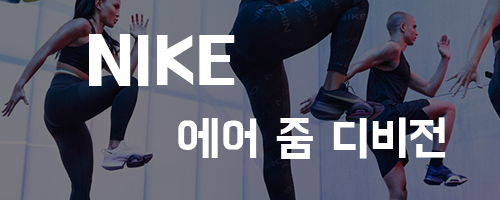
<style>
.page{position:relative;width:500px;height:200px}
.page>*{position:absolute;margin:0}
.t1{font:70px "BMHANNA11yrsold";color:#ffffff}
.t2{font:48px "BMHANNA11yrsold";color:#ffffff}
</style>
<div class="page">
<p class="t1" style="left:89px;top:34px;width:146px;height:52px">NIKE</p>
<p class="t2" style="left:178px;top:117px;width:267px;height:42px">에어 줌 디비전</p>
</div>
